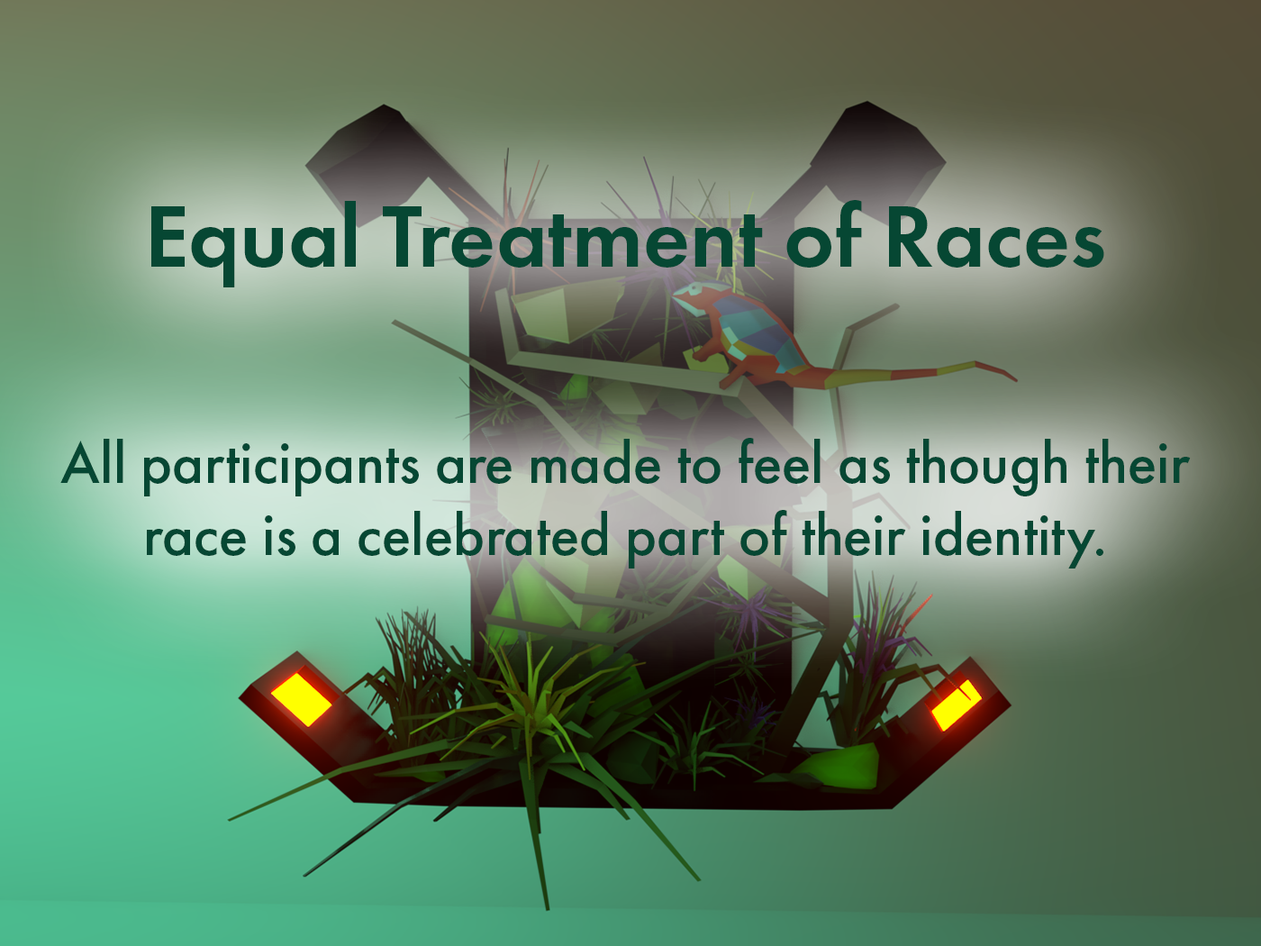
<style>
.page{position:relative;width:1261px;height:946px}
.page>*{position:absolute;margin:0}
.t1{font:60px "FuturaPT-Medium";color:#064733}
.t2{font:90.1px "FuturaPT-Demi";color:#064733}
</style>
<div class="page">
<p class="t1" style="left:60px;top:200px;width:1131px;height:368px;text-align:center"><span class="t2"><br>Equal Treatment of Races<br><br><br></span>All participants are made to feel as though their race is a celebrated part of their identity.</p>
</div>
